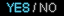
<style>
.page{position:relative;width:64px;height:16px;background:#000000}
.page>*{position:absolute;margin:0}
.t1{font:12px "ArialMT";color:#5dccdd}
.t2{font:12px "ArialMT";color:#afafaf}
</style>
<div class="page">
<p class="t1" style="left:7px;top:3px;width:22px;height:9px">YES</p>
<p class="t2" style="left:33px;top:3px;width:3px;height:9px">/</p>
<p class="t2" style="left:40px;top:3px;width:16px;height:9px">NO</p>
</div>
